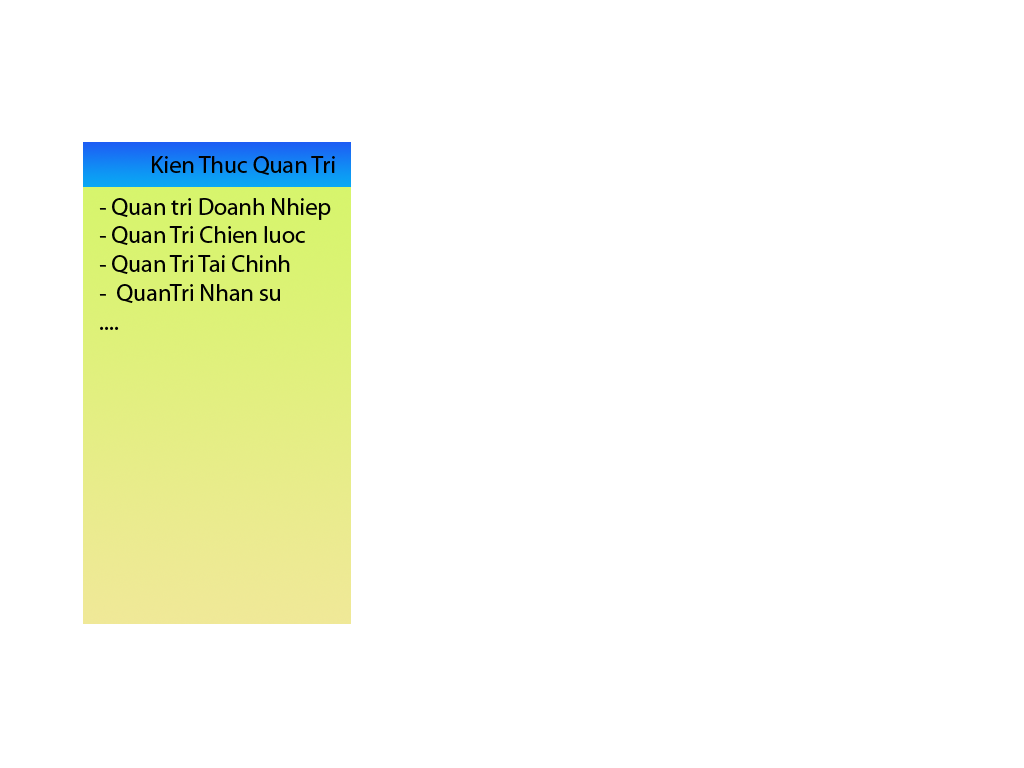
<style>
.page{position:relative;width:1024px;height:768px;background:#ffffff}
.page>*{position:absolute;margin:0}
.t1{font:24px "MyriadPro-Regular";color:#000000}
</style>
<div class="page">
<p class="t1" style="left:152px;top:156px;width:183px;height:19px">Kien Thuc Quan Tri</p>
<p class="t1" style="left:99px;top:198px;width:232px;height:132px">- Quan tri Doanh Nhiep<br>- Quan Tri Chien luoc<br>- Quan Tri Tai Chinh<br>-  QuanTri Nhan su<br>....</p>
</div>
